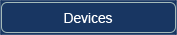
<style>
.page{position:relative;width:177px;height:35px;background:#183662}
.page>*{position:absolute;margin:0}
.t1{font:13.6px "ArialMT";color:#ffffff}
</style>
<div class="page">
<p class="t1" style="left:64px;top:13px;width:49px;height:10px">Devices</p>
</div>
